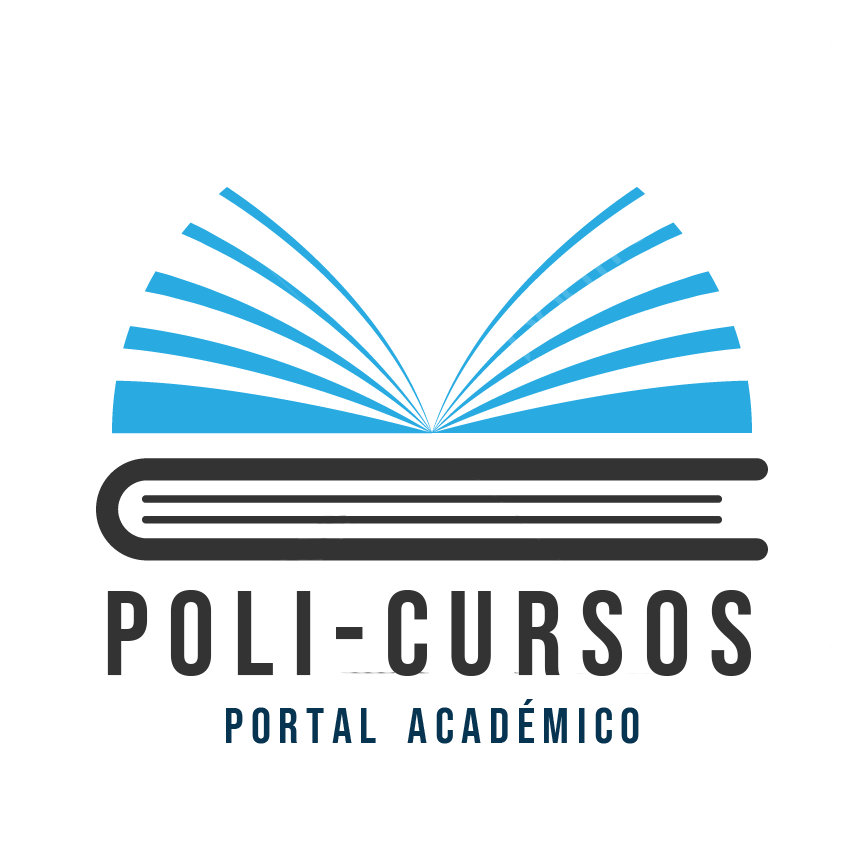
<style>
.page{position:relative;width:864px;height:864px;background:#ffffff}
.page>*{position:absolute;margin:0}
.t1{font:120px "BebasNeue-Regular";letter-spacing:-0.005em;color:#333333}
.t2{font:50px "BebasNeue-Regular";letter-spacing:-0.005em;color:#073451}
</style>
<div class="page">
<p class="t1" style="left:107px;top:590px;width:644px;height:86px">P o l i - c u r s o s</p>
<p class="t2" style="left:226px;top:699px;width:413px;height:45px">P o r t a l    a c a d é m i c o</p>
</div>
